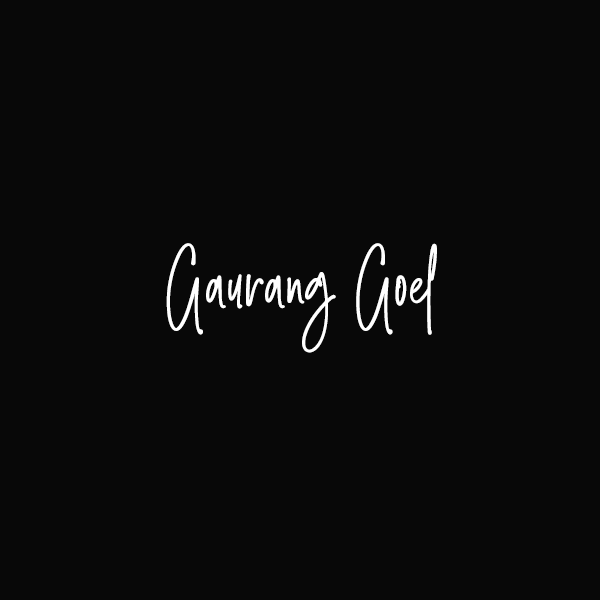
<style>
.page{position:relative;width:600px;height:600px;background:#080808}
.page>*{position:absolute;margin:0}
.t1{font:74.9px "SmoothStone-Regular";color:#ffffff}
</style>
<div class="page">
<p class="t1" style="left:166px;top:243px;width:271px;height:110px">Gaurang Goel</p>
</div>
